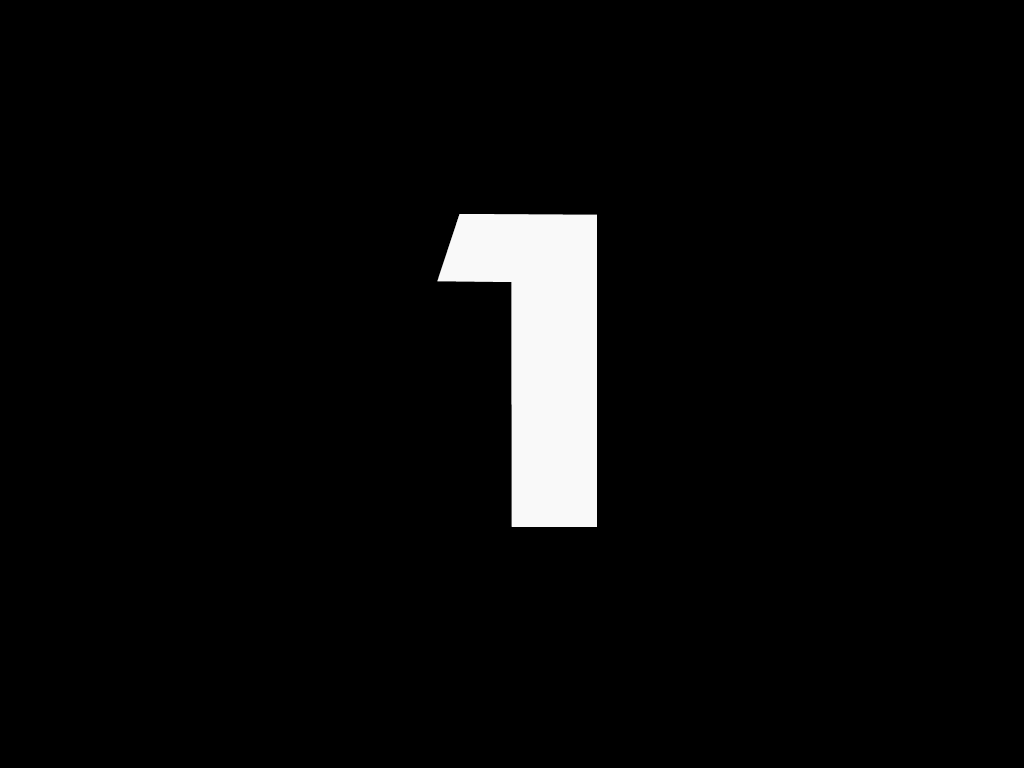
<style>
.page{position:relative;width:1024px;height:768px;background:#000000}
.page>*{position:absolute;margin:0}
.t1{font:500px "TransformersMovie";color:#f9f9f9}
</style>
<div class="page">
<p class="t1" style="left:437px;top:214px;width:160px;height:313px">1</p>
</div>
